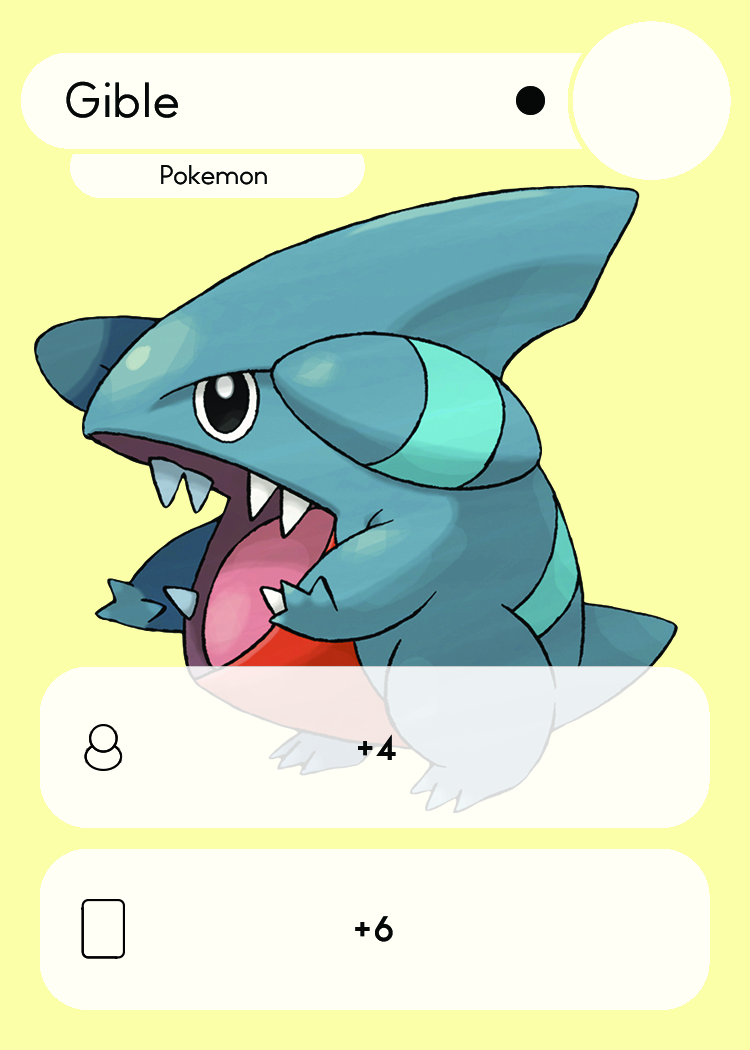
<style>
.page{position:relative;width:750px;height:1050px;background:#fbffa8}
.page>*{position:absolute;margin:0}
.t1{font:46.7px "WatchwordRegularDemo";color:#060808}
.t2{font:25.5px "WatchwordRegularDemo";color:#060808}
.t3{font:33.3px "WatchwordBoldDemo";color:#060808}
</style>
<div class="page">
<p class="t1" style="left:66px;top:81px;width:112px;height:37px">Gible</p>
<p class="t2" style="left:161px;top:165px;width:106px;height:20px">Pokemon</p>
<p class="t3" style="left:358px;top:734px;width:38px;height:26px">+4</p>
<p class="t3" style="left:355px;top:916px;width:38px;height:26px">+6</p>
</div>
